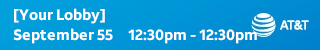
<style>
.page{position:relative;width:320px;height:50px}
.page>*{position:absolute;margin:0}
.t1{font:15px/20px "ATTAleckSans_Bold";color:#ffffff}
</style>
<div class="page">
<p class="t1" style="left:13px;top:8px;width:244px;height:36px">[Your Lobby]<br>September 55     12:30pm - 12:30pm</p>
</div>
